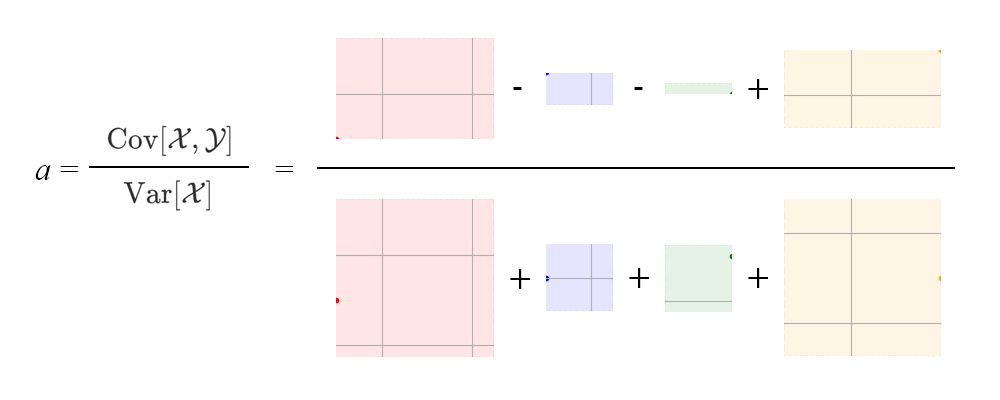
<style>
.page{position:relative;width:1000px;height:400px;background:#ffffff}
.page>*{position:absolute;margin:0}
.t1{font:33.3px "TimesNewRomanPSMT";color:#000000}
.t2{font:33.3px "KozGoPr6N-Regular";color:#000000}
.t3{font:33.3px "TimesNewRomanPS-ItalicMT";color:#000000}
</style>
<div class="page">
<p class="t1" style="left:513px;top:87px;width:9px;height:3px">-</p>
<p class="t1" style="left:634px;top:87px;width:9px;height:3px">-</p>
<p class="t2" style="left:748px;top:79px;width:20px;height:20px">+</p>
<p class="t3" style="left:35px;top:165px;width:43px;height:15px">a<span class="t1"> =</span></p>
<p class="t1" style="left:275px;top:166px;width:18px;height:6px">=</p>
<p class="t2" style="left:510px;top:269px;width:20px;height:20px">+</p>
<p class="t2" style="left:629px;top:268px;width:20px;height:20px">+</p>
<p class="t2" style="left:748px;top:268px;width:20px;height:20px">+</p>
</div>
